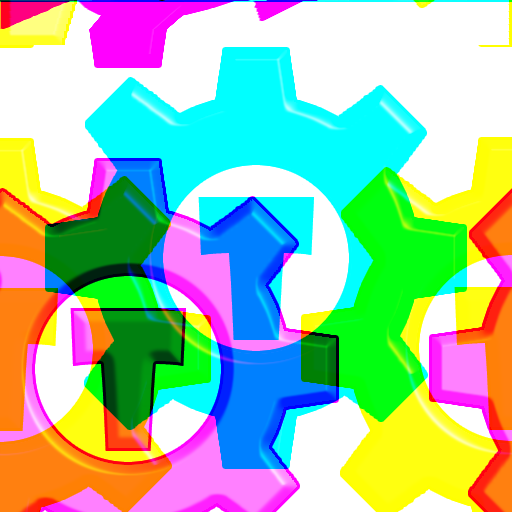
<style>
.page{position:relative;width:512px;height:512px;background:#ffffff}
.page>*{position:absolute;margin:0}
.t1{font:190px "ShowcardGothic-Reg"}
</style>
<div class="page">
<p class="t1" style="left:198px;top:195px;width:116px;height:143px">T</p>
</div>
